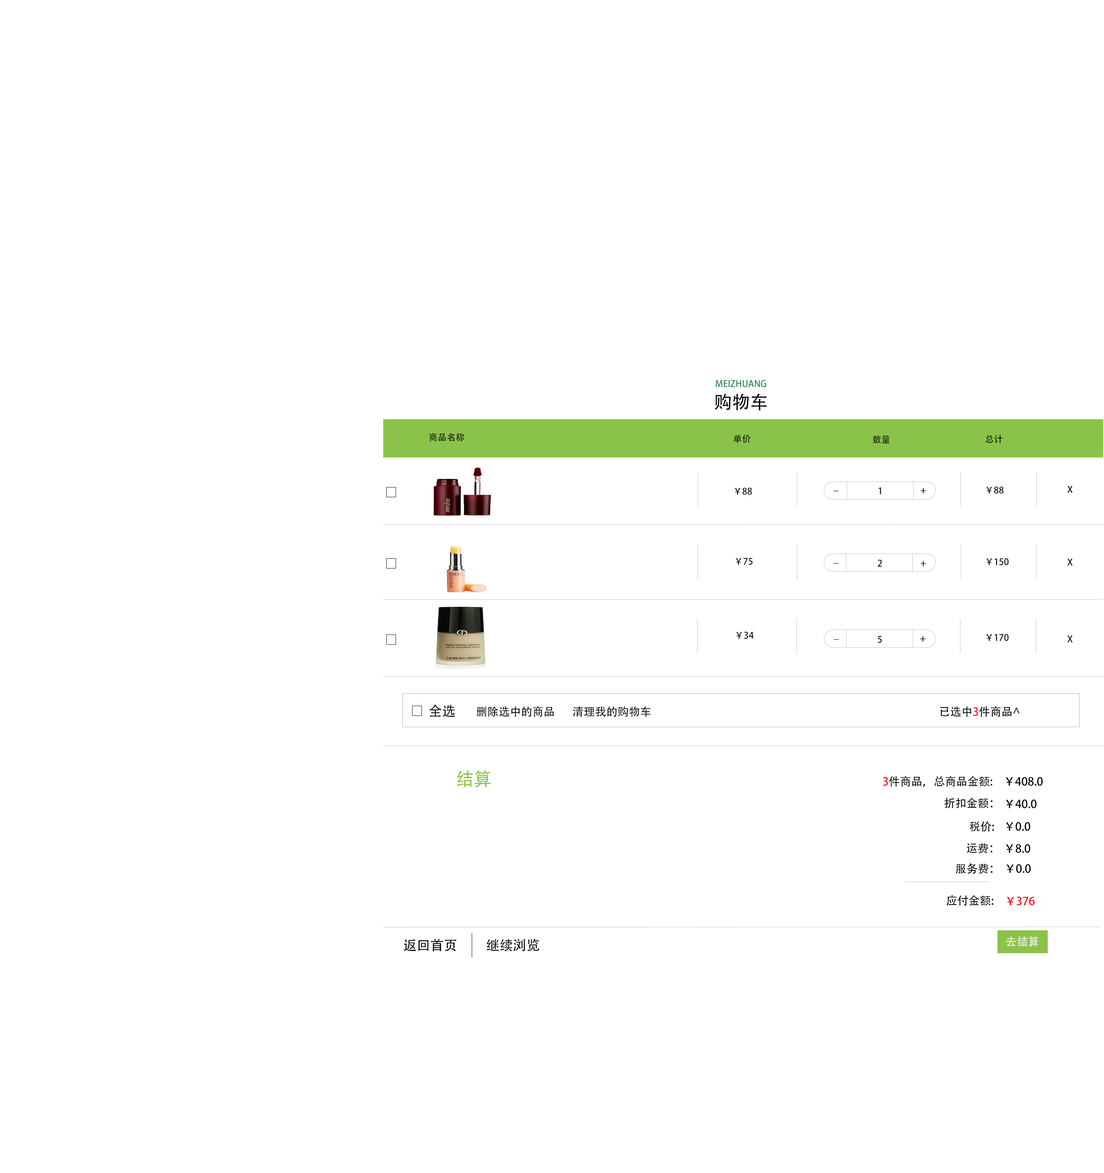
<style>
.page{position:relative;width:1104px;height:1173px;background:#ffffff}
.page>*{position:absolute;margin:0}
.t1{font:9px "AdobeHeitiStd-Regular";color:#268b4c}
.t2{font:18px "AdobeHeitiStd-Regular";color:#000000}
.t3{font:9px "AdobeHeitiStd-Regular";color:#0d0d0c}
.t4{font:13.5px "AdobeHeitiStd-Regular";color:#110f10}
.t5{font:11.2px "AdobeHeitiStd-Regular";color:#110f10}
.t6{font:11.2px "AdobeHeitiStd-Regular";color:#060606}
.t7{font:11.2px "AdobeHeitiStd-Regular";color:#f1171c}
.t8{font:18px "AdobeHeitiStd-Regular";color:#8bc34a}
.t9{font:11.2px "AdobeHeitiStd-Regular";color:#0b0a0b}
.t10{font:11.2px "AdobeHeitiStd-Regular";color:#f60a20}
.t11{font:11.2px "AdobeHeitiStd-Regular";color:#050505}
.t12{font:11.2px "AdobeHeitiStd-Regular";color:#f60617}
.t13{font:13.5px "AdobeHeitiStd-Regular";color:#050800}
.t14{font:11.2px "AdobeHeitiStd-Regular";color:#f9f1f2}
</style>
<div class="page">
<p class="t1" style="left:716px;top:380px;width:50px;height:7px">MEIZHUANG</p>
<p class="t2" style="left:714px;top:393px;width:53px;height:18px">购物车</p>
<p class="t3" style="left:429px;top:433px;width:35px;height:8px">商品名称</p>
<p class="t3" style="left:734px;top:434px;width:17px;height:9px">单价</p>
<p class="t3" style="left:873px;top:435px;width:17px;height:9px">数量</p>
<p class="t3" style="left:986px;top:435px;width:17px;height:8px">总计</p>
<p class="t3" style="left:1067px;top:486px;width:6px;height:7px">X</p>
<p class="t3" style="left:735px;top:488px;width:17px;height:7px">￥88</p>
<p class="t3" style="left:833px;top:490px;width:6px;height:1px">_</p>
<p class="t3" style="left:878px;top:488px;width:3px;height:6px">1</p>
<p class="t3" style="left:921px;top:488px;width:5px;height:6px">+</p>
<p class="t3" style="left:986px;top:486px;width:18px;height:8px">￥88</p>
<p class="t3" style="left:736px;top:558px;width:17px;height:7px">￥75</p>
<p class="t3" style="left:986px;top:558px;width:23px;height:8px">￥150</p>
<p class="t3" style="left:833px;top:563px;width:6px;height:1px">_</p>
<p class="t3" style="left:878px;top:560px;width:4px;height:7px">2</p>
<p class="t3" style="left:921px;top:561px;width:5px;height:5px">+</p>
<p class="t3" style="left:1067px;top:558px;width:6px;height:8px">X</p>
<p class="t3" style="left:736px;top:632px;width:18px;height:7px">￥34</p>
<p class="t3" style="left:834px;top:639px;width:5px;height:1px">_</p>
<p class="t3" style="left:878px;top:636px;width:4px;height:7px">5</p>
<p class="t3" style="left:920px;top:636px;width:6px;height:6px">+</p>
<p class="t3" style="left:986px;top:634px;width:23px;height:7px">￥170</p>
<p class="t3" style="left:1067px;top:635px;width:6px;height:7px">X</p>
<p class="t4" style="left:429px;top:705px;width:26px;height:12px">全选</p>
<p class="t5" style="left:477px;top:706px;width:77px;height:11px">删除选中的商品</p>
<p class="t5" style="left:573px;top:706px;width:78px;height:11px">清理我的购物车</p>
<p class="t6" style="left:940px;top:706px;width:80px;height:11px"><span class="t5">已选中</span><span class="t7">3</span>件商品^</p>
<p class="t8" style="left:457px;top:770px;width:33px;height:18px">结算</p>
<p class="t9" style="left:883px;top:776px;width:109px;height:11px"><span class="t10">3</span>件商品，总商品金额:</p>
<p class="t11" style="left:1006px;top:777px;width:37px;height:9px">￥408.0</p>
<p class="t11" style="left:944px;top:798px;width:49px;height:10px">折扣金额：</p>
<p class="t11" style="left:1006px;top:800px;width:30px;height:8px">￥40.0</p>
<p class="t11" style="left:970px;top:821px;width:24px;height:11px">税价:</p>
<p class="t11" style="left:1006px;top:822px;width:24px;height:9px">￥0.0</p>
<p class="t11" style="left:967px;top:843px;width:26px;height:11px">运费：</p>
<p class="t11" style="left:1006px;top:844px;width:24px;height:9px">￥8.0</p>
<p class="t11" style="left:956px;top:863px;width:37px;height:11px">服务费：</p>
<p class="t11" style="left:1006px;top:864px;width:25px;height:9px">￥0.0</p>
<p class="t11" style="left:946px;top:895px;width:47px;height:11px">应付金额:</p>
<p class="t12" style="left:1007px;top:897px;width:28px;height:9px">￥376</p>
<p class="t13" style="left:404px;top:939px;width:52px;height:12px">返回首页</p>
<p class="t13" style="left:486px;top:939px;width:53px;height:12px">继续浏览</p>
<p class="t14" style="left:1006px;top:936px;width:33px;height:11px">去结算</p>
</div>
